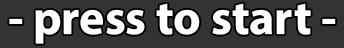
<style>
.page{position:relative;width:344px;height:48px;background:#333333}
.page>*{position:absolute;margin:0}
.t1{font:48px "MyriadConceptRoman-Bold";color:#ffffff}
</style>
<div class="page">
<p class="t1" style="left:9px;top:3px;width:327px;height:41px">- press to start -</p>
</div>
